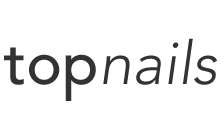
<style>
.page{position:relative;width:224px;height:140px;background:#ffffff}
.page>*{position:absolute;margin:0}
.t1{font:60px "AvenirLT-LightOblique";color:#333333}
.t2{font:60px "AvenirLT-Medium";color:#333333}
</style>
<div class="page">
<p class="t1" style="left:4px;top:38px;width:213px;height:63px"><span class="t2">top</span>nails</p>
</div>
